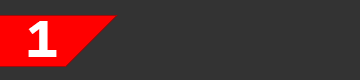
<style>
.page{position:relative;width:360px;height:80px;background:#333333}
.page>*{position:absolute;margin:0}
.t1{font:50px "Moire-Bold";color:#ffffff}
</style>
<div class="page">
<p class="t1" style="left:28px;top:21px;width:29px;height:36px">1</p>
</div>
